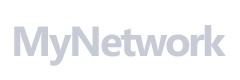
<style>
.page{position:relative;width:240px;height:80px;background:#ffffff}
.page>*{position:absolute;margin:0}
.t1{font:42px "SegoeUI-Bold";letter-spacing:-0.06em;color:#c7cbd6}
</style>
<div class="page">
<p class="t1" style="left:14px;top:25px;width:212px;height:41px">MyNetwork</p>
</div>
